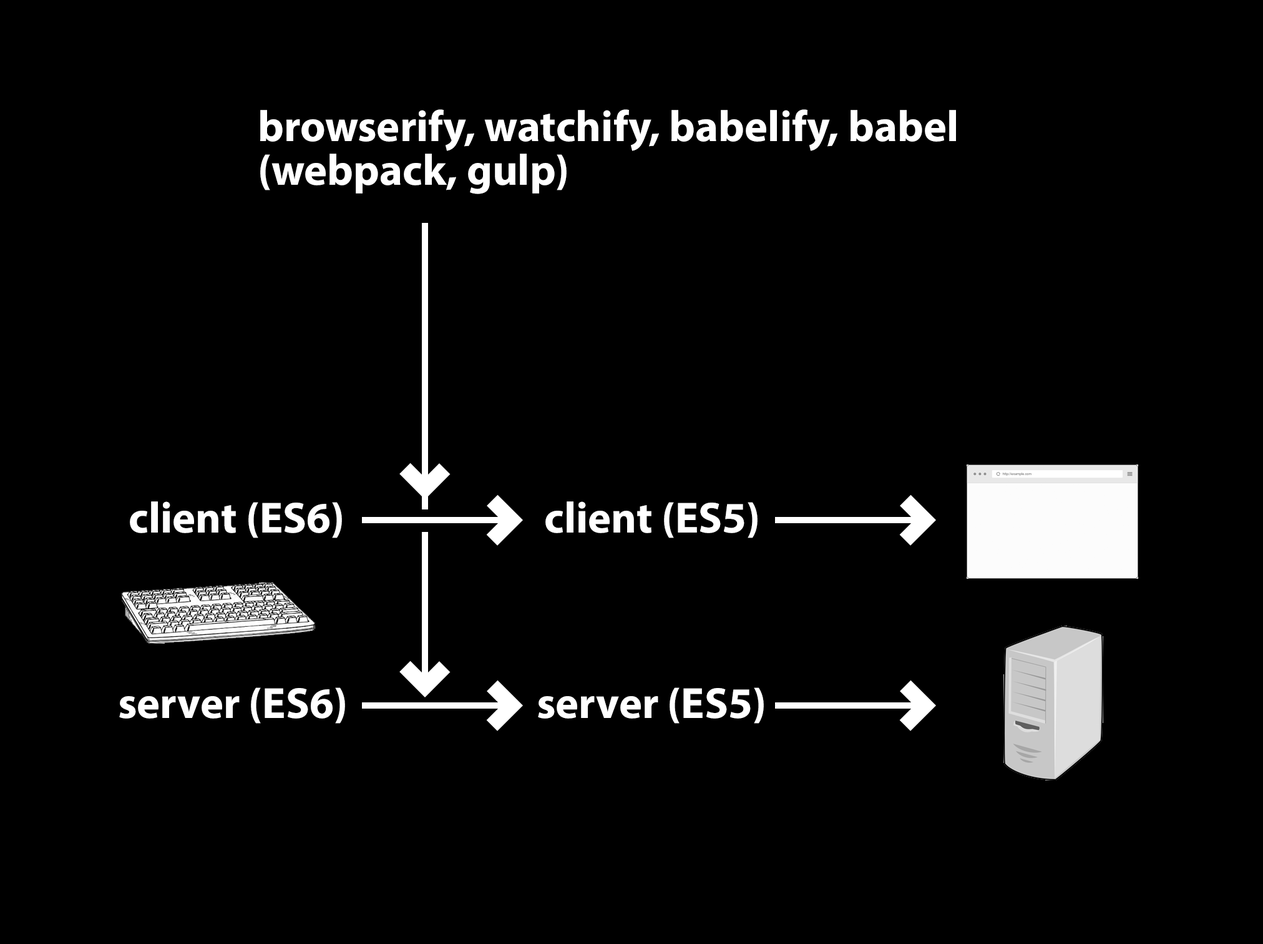
<style>
.page{position:relative;width:1263px;height:944px;background:#000000}
.page>*{position:absolute;margin:0}
.t1{font:43.7px/43.7px "MyriadPro-Bold";color:#ffffff}
.t2{font:43.7px "MyriadPro-Bold";color:#ffffff}
</style>
<div class="page">
<p class="t1" style="left:260px;top:109px;width:696px;height:85px">browserify, watchify, babelify, babel<br>(webpack, gulp)</p>
<p class="t2" style="left:130px;top:501px;width:212px;height:37px">client (ES6)</p>
<p class="t2" style="left:546px;top:501px;width:212px;height:37px">client (ES5)</p>
<p class="t2" style="left:119px;top:687px;width:226px;height:36px">server (ES6)</p>
<p class="t2" style="left:538px;top:687px;width:226px;height:36px">server (ES5)</p>
</div>
